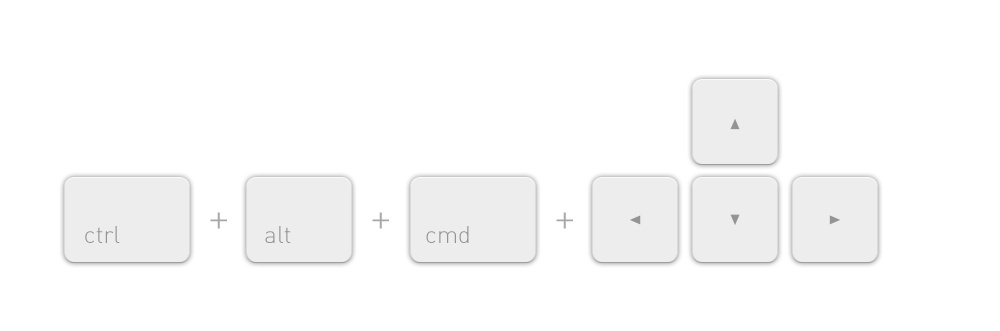
<style>
.page{position:relative;width:1000px;height:331px;background:#ffffff}
.page>*{position:absolute;margin:0}
.t1{font:40px "DIN-Light";color:#a7a7a7}
.t2{font:24px "DIN-Light";color:#949494}
</style>
<div class="page">
<p class="t1" style="left:210px;top:212px;width:17px;height:17px">+</p>
<p class="t1" style="left:372px;top:212px;width:17px;height:17px">+</p>
<p class="t1" style="left:556px;top:212px;width:17px;height:17px">+</p>
<p class="t2" style="left:85px;top:226px;width:35px;height:17px">ctrl</p>
<p class="t2" style="left:265px;top:226px;width:26px;height:17px">alt</p>
<p class="t2" style="left:426px;top:226px;width:43px;height:17px">cmd</p>
</div>
